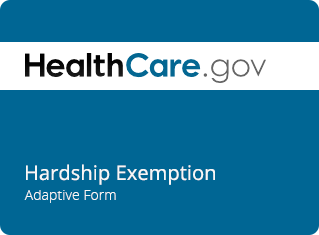
<style>
.page{position:relative;width:319px;height:235px;background:#006694}
.page>*{position:absolute;margin:0}
.t1{font:20px "OpenSans";letter-spacing:0.005em;color:#f7f7f7}
.t2{font:14px "OpenSans-Light";letter-spacing:0.005em;color:#f7f7f7}
</style>
<div class="page">
<p class="t1" style="left:26px;top:164px;width:189px;height:21px">Hardship Exemption</p>
<p class="t2" style="left:24px;top:190px;width:92px;height:13px">Adaptive Form</p>
</div>
